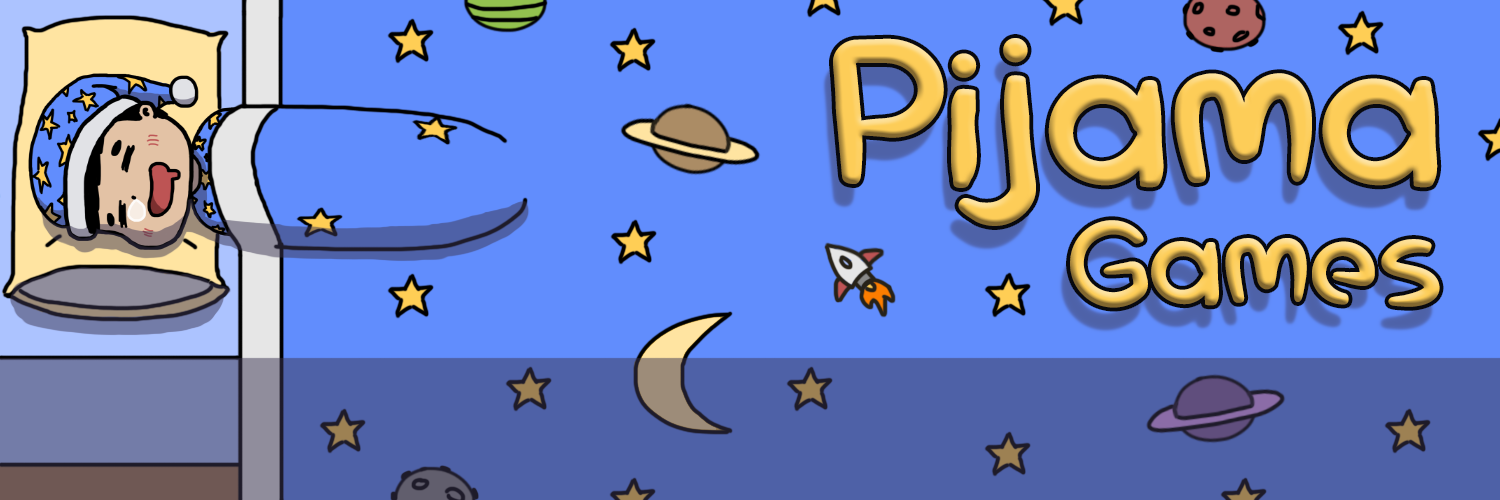
<style>
.page{position:relative;width:1500px;height:500px;background:#618dfd}
.page>*{position:absolute;margin:0}
.t1{font:204px "GhusrakRegular";color:#ffce55}
.t2{font:120.4px "GhusrakRegular"}
</style>
<div class="page">
<p class="t1" style="left:833px;top:38px;width:605px;height:188px">Pijama</p>
<p class="t2" style="left:1070px;top:220px;width:370px;height:88px">Games</p>
</div>
